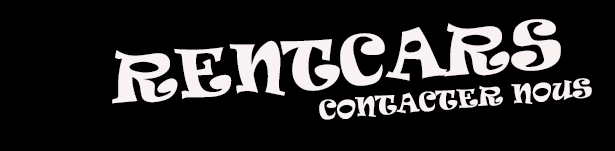
<style>
.page{position:relative;width:615px;height:151px;background:#000000}
.page>*{position:absolute;margin:0}
.t1{font:24px/33px "Ravie";color:#f8f2f2;text-transform:uppercase}
.t2{font:29px/59px "Ravie";color:#f8f2f2;text-transform:uppercase}
.t3{font:63.3px/56px "Ravie";color:#f8f2f2;text-transform:uppercase}
</style>
<div class="page">
<p class="t1" style="left:112px;top:19px;width:480px;height:101px;text-align:center;rotate:-5deg"><span class="t2">                   </span><span class="t3"><br>   RENTCARS</span> <br>                                  CONTACTER NOUS</p>
</div>
